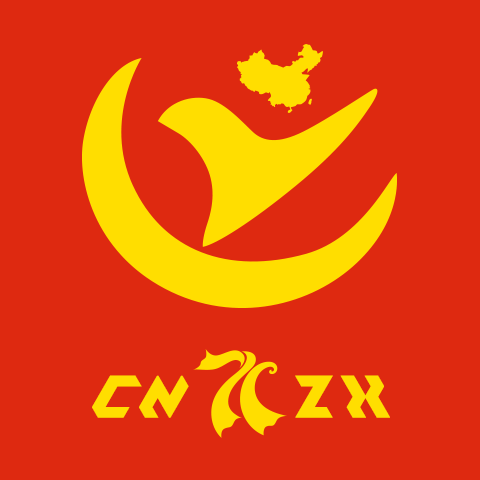
<style>
.page{position:relative;width:480px;height:480px;background:#de2910}
.page>*{position:absolute;margin:0}
.t1{font:41.7px "TrickShot";letter-spacing:0.1em;color:#ffde00;font-weight:bold}
</style>
<div class="page">
<p class="t1" style="left:92px;top:375px;width:298px;height:43px">CN   ZX</p>
</div>
